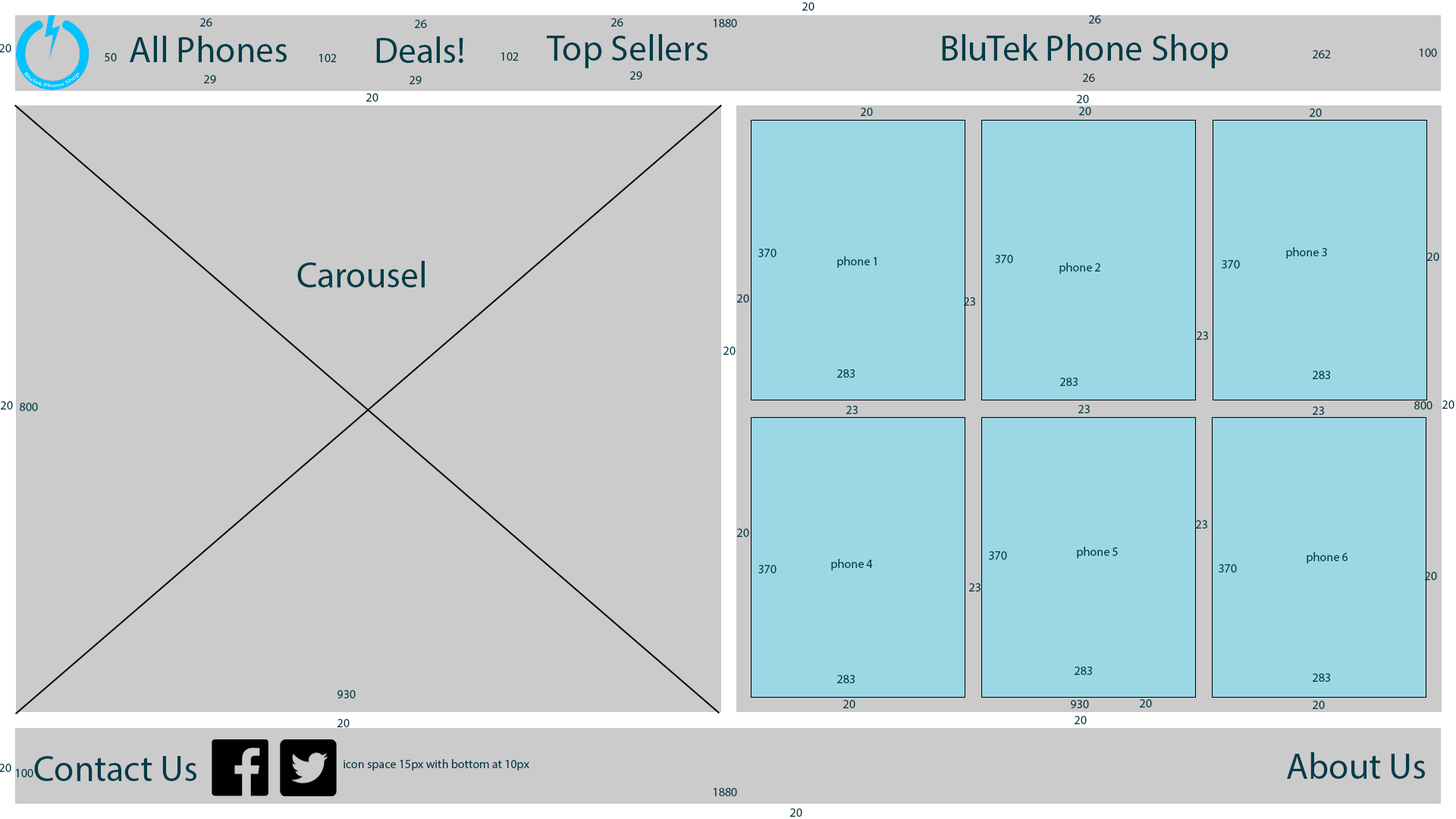
<style>
.page{position:relative;width:1456px;height:819px;background:#cbcbcb}
.page>*{position:absolute;margin:0}
.t1{font:12.1px "MyriadPro-Regular";color:#023c49}
.t2{font:36.4px "MyriadPro-Regular";color:#023c49}
</style>
<div class="page">
<p class="t1" style="left:802px;top:2px;width:12px;height:9px">20</p>
<p class="t1" style="left:1089px;top:15px;width:12px;height:9px">26</p>
<p class="t1" style="left:200px;top:18px;width:12px;height:9px">26</p>
<p class="t1" style="left:415px;top:20px;width:12px;height:8px">26</p>
<p class="t1" style="left:611px;top:18px;width:12px;height:9px">26</p>
<p class="t1" style="left:714px;top:19px;width:23px;height:8px">1880</p>
<p class="t2" style="left:130px;top:36px;width:157px;height:26px">All Phones</p>
<p class="t2" style="left:376px;top:36px;width:87px;height:27px">Deals!</p>
<p class="t2" style="left:547px;top:34px;width:161px;height:34px">Top Sellers</p>
<p class="t2" style="left:942px;top:34px;width:286px;height:34px">BluTek Phone Shop</p>
<p class="t1" style="left:0px;top:44px;width:11px;height:8px">20</p>
<p class="t1" style="left:105px;top:53px;width:12px;height:8px">50</p>
<p class="t1" style="left:319px;top:54px;width:18px;height:8px">102</p>
<p class="t1" style="left:501px;top:52px;width:18px;height:9px">102</p>
<p class="t1" style="left:1313px;top:50px;width:18px;height:8px">262</p>
<p class="t1" style="left:1420px;top:49px;width:17px;height:8px">100</p>
<p class="t1" style="left:204px;top:75px;width:12px;height:8px">29</p>
<p class="t1" style="left:409px;top:76px;width:13px;height:8px">29</p>
<p class="t1" style="left:630px;top:71px;width:12px;height:9px">29</p>
<p class="t1" style="left:1083px;top:74px;width:12px;height:8px">26</p>
<p class="t1" style="left:366px;top:93px;width:12px;height:9px">20</p>
<p class="t1" style="left:1077px;top:95px;width:12px;height:8px">20</p>
<p class="t1" style="left:861px;top:108px;width:12px;height:8px">20</p>
<p class="t1" style="left:1079px;top:107px;width:12px;height:8px">20</p>
<p class="t1" style="left:1310px;top:108px;width:12px;height:9px">20</p>
<p class="t1" style="left:758px;top:249px;width:19px;height:8px">370</p>
<p class="t1" style="left:837px;top:256px;width:40px;height:12px">phone 1</p>
<p class="t1" style="left:995px;top:255px;width:18px;height:8px">370</p>
<p class="t1" style="left:1286px;top:247px;width:41px;height:12px">phone 3</p>
<p class="t1" style="left:1427px;top:253px;width:12px;height:8px">20</p>
<p class="t2" style="left:297px;top:261px;width:128px;height:26px">Carousel</p>
<p class="t1" style="left:1059px;top:262px;width:41px;height:12px">phone 2</p>
<p class="t1" style="left:1222px;top:260px;width:18px;height:8px">370</p>
<p class="t1" style="left:737px;top:294px;width:12px;height:9px">20</p>
<p class="t1" style="left:964px;top:297px;width:11px;height:9px">23</p>
<p class="t1" style="left:1197px;top:331px;width:11px;height:9px">23</p>
<p class="t1" style="left:723px;top:347px;width:13px;height:8px">20</p>
<p class="t1" style="left:837px;top:369px;width:18px;height:9px">283</p>
<p class="t1" style="left:1060px;top:378px;width:18px;height:8px">283</p>
<p class="t1" style="left:1313px;top:371px;width:17px;height:8px">283</p>
<p class="t1" style="left:1px;top:401px;width:12px;height:8px">20</p>
<p class="t1" style="left:1414px;top:401px;width:18px;height:8px">800</p>
<p class="t1" style="left:1442px;top:400px;width:12px;height:9px">20</p>
<p class="t1" style="left:20px;top:403px;width:18px;height:8px">800</p>
<p class="t1" style="left:846px;top:406px;width:12px;height:8px">23</p>
<p class="t1" style="left:1078px;top:405px;width:12px;height:8px">23</p>
<p class="t1" style="left:1313px;top:406px;width:11px;height:9px">23</p>
<p class="t1" style="left:1196px;top:520px;width:11px;height:9px">23</p>
<p class="t1" style="left:737px;top:529px;width:12px;height:8px">20</p>
<p class="t1" style="left:989px;top:551px;width:18px;height:9px">370</p>
<p class="t1" style="left:1077px;top:547px;width:41px;height:11px">phone 5</p>
<p class="t1" style="left:1307px;top:552px;width:41px;height:11px">phone 6</p>
<p class="t1" style="left:758px;top:565px;width:19px;height:8px">370</p>
<p class="t1" style="left:831px;top:559px;width:42px;height:11px">phone 4</p>
<p class="t1" style="left:1219px;top:564px;width:18px;height:9px">370</p>
<p class="t1" style="left:1425px;top:572px;width:12px;height:8px">20</p>
<p class="t1" style="left:969px;top:583px;width:12px;height:8px">23</p>
<p class="t1" style="left:837px;top:675px;width:18px;height:8px">283</p>
<p class="t1" style="left:1075px;top:667px;width:17px;height:8px">283</p>
<p class="t1" style="left:1313px;top:673px;width:17px;height:9px">283</p>
<p class="t1" style="left:337px;top:690px;width:19px;height:8px">930</p>
<p class="t1" style="left:843px;top:700px;width:12px;height:8px">20</p>
<p class="t1" style="left:1071px;top:700px;width:18px;height:8px">930</p>
<p class="t1" style="left:1140px;top:699px;width:12px;height:9px">20</p>
<p class="t1" style="left:1313px;top:701px;width:12px;height:8px">20</p>
<p class="t1" style="left:337px;top:719px;width:13px;height:8px">20</p>
<p class="t1" style="left:1075px;top:716px;width:12px;height:8px">20</p>
<p class="t2" style="left:34px;top:756px;width:162px;height:25px">Contact Us</p>
<p class="t1" style="left:344px;top:759px;width:185px;height:11px">icon space 15px with bottom at 10px</p>
<p class="t2" style="left:1287px;top:752px;width:138px;height:27px">About Us</p>
<p class="t1" style="left:0px;top:764px;width:11px;height:8px">20</p>
<p class="t1" style="left:16px;top:769px;width:17px;height:8px">100</p>
<p class="t1" style="left:714px;top:788px;width:23px;height:8px">1880</p>
<p class="t1" style="left:790px;top:808px;width:12px;height:9px">20</p>
</div>
